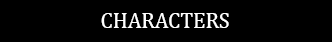
<style>
.page{position:relative;width:332px;height:42px;background:#000000}
.page>*{position:absolute;margin:0}
.t1{font:21.7px "Cambria";color:#ffffff}
</style>
<div class="page">
<p class="t1" style="left:101px;top:13px;width:128px;height:15px">CHARACTERS</p>
</div>
